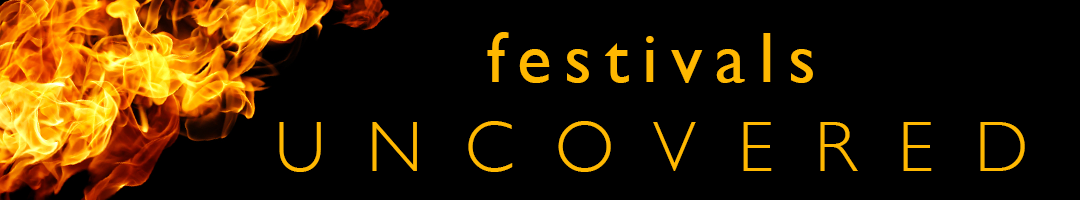
<style>
.page{position:relative;width:1080px;height:200px;background:#000000}
.page>*{position:absolute;margin:0}
.t1{font:72px "GillSans";letter-spacing:0.18em;color:#ffb800}
.t2{font:72px "GillSans-Light";letter-spacing:0.58em;color:#ffb800}
</style>
<div class="page">
<p class="t1" style="left:487px;top:32px;width:326px;height:51px">festivals</p>
<p class="t2" style="left:279px;top:121px;width:746px;height:51px">UNCOVERED</p>
</div>
